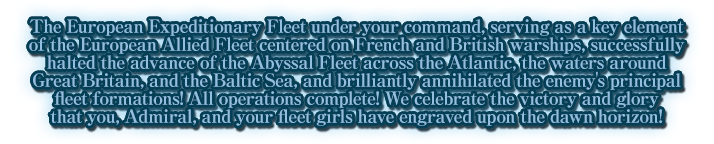
<style>
.page{position:relative;width:714px;height:144px;background:#053f55}
.page>*{position:absolute;margin:0}
.t1{font:18px/18px "RyuminPro-ExBold";letter-spacing:-0.04em;color:#93bee0}
</style>
<div class="page">
<p class="t1" style="left:29px;top:19px;width:656px;height:107px;text-align:center">The European Expeditionary Fleet under your command, serving as a key element<br>of the European Allied Fleet centered on French and British warships, successfully<br>halted the advance of the Abyssal Fleet across the Atlantic, the waters around<br>Great Britain, and the Baltic Sea, and brilliantly annihilated the enemy's principal<br>fleet formations! All operations complete! We celebrate the victory and glory<br>that you, Admiral, and your fleet girls have engraved upon the dawn horizon!</p>
</div>
